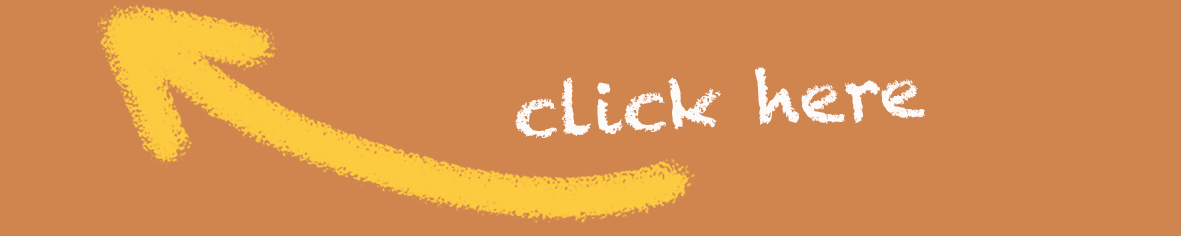
<style>
.page{position:relative;width:1181px;height:236px;background:#d1854e}
.page>*{position:absolute;margin:0}
.t1{font:71.8px "Chalkduster";color:#fcfbfa}
</style>
<div class="page">
<p class="t1" style="left:515px;top:67px;width:410px;height:71px;rotate:-3deg">click here</p>
</div>
